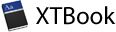
<style>
.page{position:relative;width:116px;height:32px;background:#ffffff}
.page>*{position:absolute;margin:0}
.t1{font:25px "MyriadPro-Regular";color:#000000}
</style>
<div class="page">
<p class="t1" style="left:36px;top:6px;width:80px;height:19px">XTBook</p>
</div>
